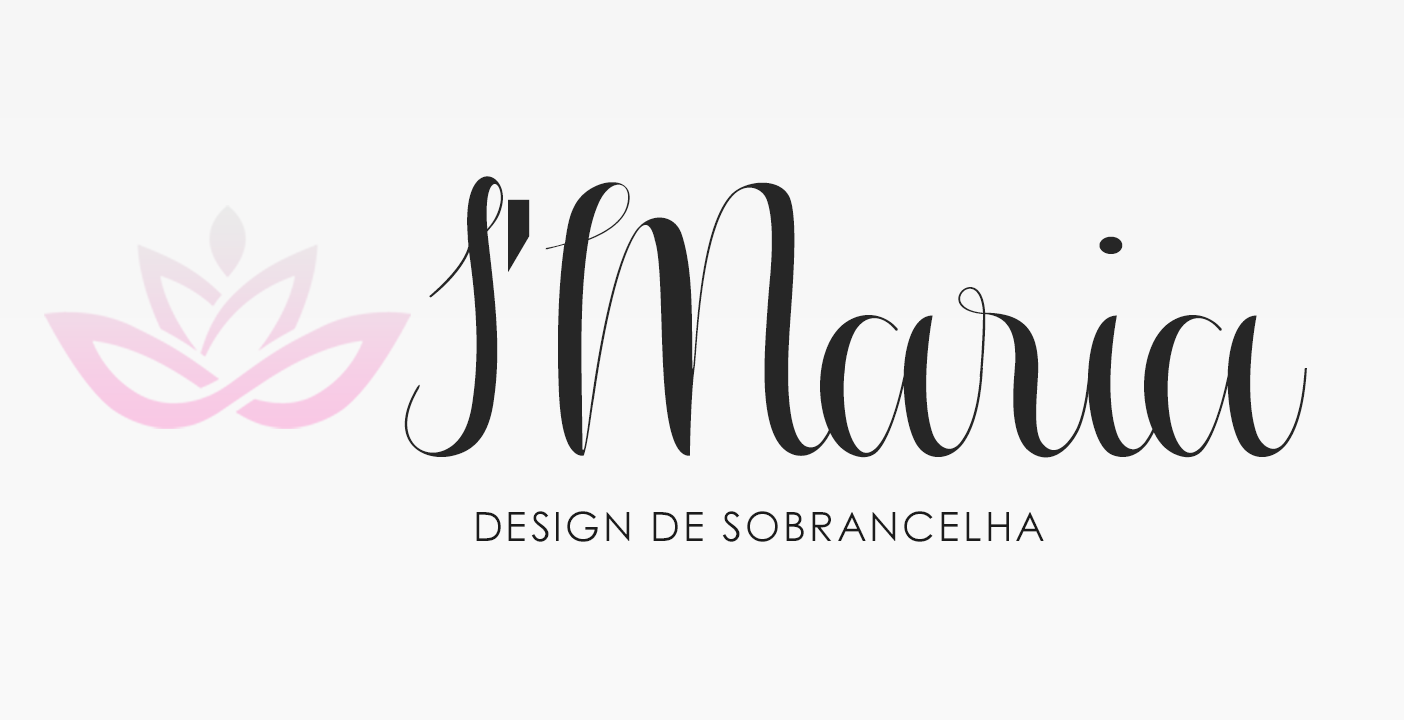
<style>
.page{position:relative;width:1404px;height:720px;background:#f9f9f9}
.page>*{position:absolute;margin:0}
.t1{font:576.9px "Aureliaregular";color:#262626;scale:1.16 1}
.t2{font:576.9px "Aureliaregular";letter-spacing:-0.03em;color:#262626;scale:1.16 1}
.t3{font:361.9px "Bahnschrift";letter-spacing:-0.03em;color:#262626;scale:0.58 1}
.t4{font:40.3px "CenturyGothic";letter-spacing:0.08em;color:#1b1b1b}
</style>
<div class="page">
<p class="t1" style="left:404px;top:176px;width:903px;height:282px"><span class="t2">I</span><span class="t3">’ </span><span class="t2">M</span>ar<span class="t2">ia</span></p>
<p class="t4" style="left:476px;top:511px;width:568px;height:31px">DESIGN DE SOBRANCELHA</p>
</div>
